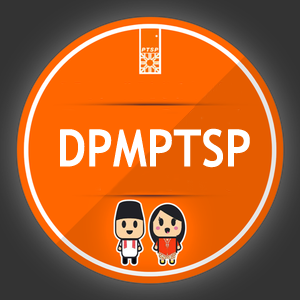
<style>
.page{position:relative;width:300px;height:300px;background:#ff6600}
.page>*{position:absolute;margin:0}
.t1{font:51.6px "TrebuchetMS-Bold";color:#ffffff;scale:0.88 1}
</style>
<div class="page">
<p class="t1" style="left:60px;top:128px;width:190px;height:40px">DPMPTSP</p>
</div>
